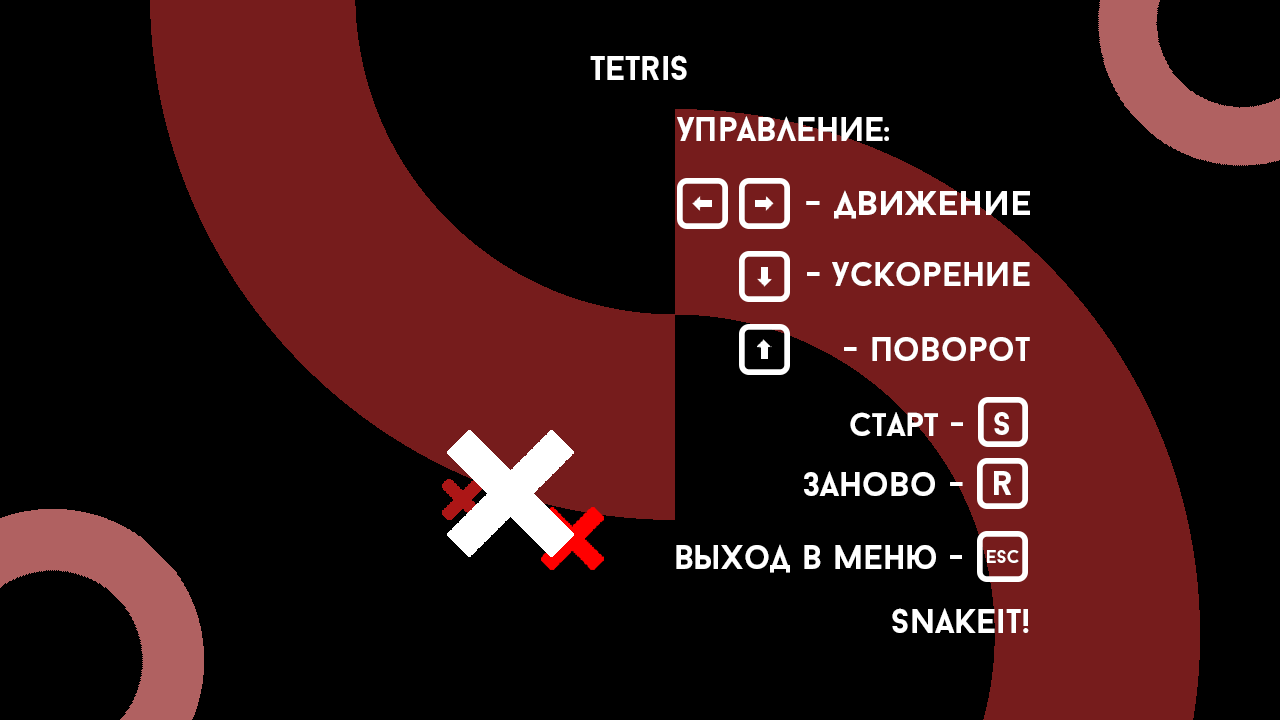
<style>
.page{position:relative;width:1280px;height:720px;background:#000000}
.page>*{position:absolute;margin:0}
.t1{font:34px "BaronNeueBold";color:#ffffff}
.t2{font:34px "BaronNeueBold";color:#ffffff;scale:1.07 1}
.t3{font:33.1px "BaronNeueBold";color:#ffffff}
.t4{font:34px "BaronNeueBold";color:#ffffff;scale:0.97 1}
.t5{font:18.5px "BaronNeueBold";color:#ffffff}
</style>
<div class="page">
<p class="t1" style="left:590px;top:55px;width:97px;height:25px">tetris</p>
<p class="t1" style="left:677px;top:116px;width:212px;height:25px">Управление:</p>
<p class="t2" style="left:806px;top:190px;width:224px;height:29px">- движение</p>
<p class="t1" style="left:807px;top:262px;width:223px;height:24px">- ускорение</p>
<p class="t1" style="left:844px;top:337px;width:186px;height:24px">- поворот</p>
<p class="t3" style="left:850px;top:412px;width:113px;height:24px">старт -</p>
<p class="t3" style="left:994px;top:412px;width:15px;height:23px">s</p>
<p class="t1" style="left:804px;top:471px;width:159px;height:25px">заново -</p>
<p class="t2" style="left:994px;top:471px;width:17px;height:24px">r</p>
<p class="t4" style="left:676px;top:544px;width:286px;height:29px">выход в меню -</p>
<p class="t5" style="left:987px;top:550px;width:32px;height:13px">esc</p>
<p class="t1" style="left:892px;top:608px;width:137px;height:25px">snakeit!</p>
</div>
